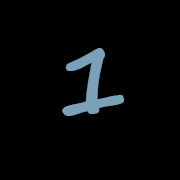
<style>
.page{position:relative;width:180px;height:180px;background:#000000}
.page>*{position:absolute;margin:0}
.t1{font:100px "SegoePrint-Bold";color:#7aa1b7}
</style>
<div class="page">
<p class="t1" style="left:62px;top:48px;width:63px;height:68px">1</p>
</div>
